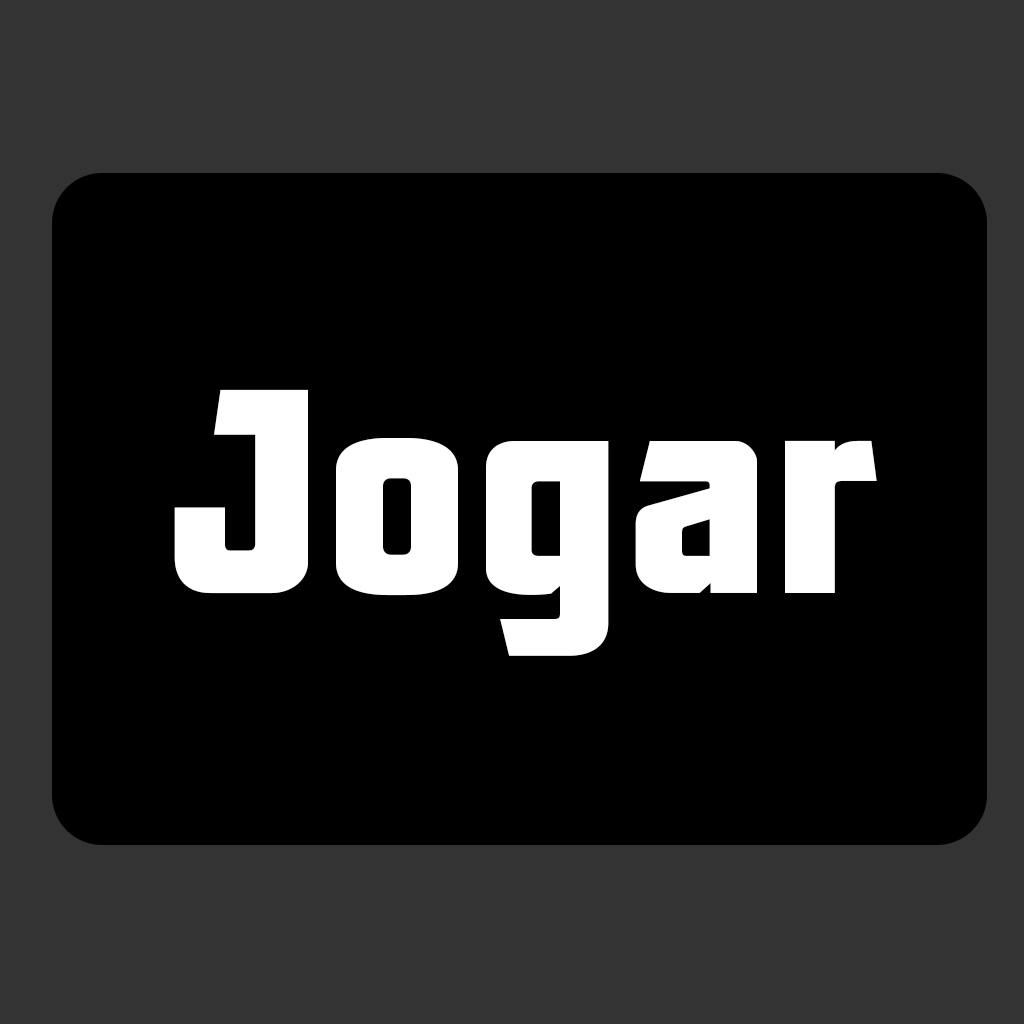
<style>
.page{position:relative;width:1024px;height:1024px;background:#000000}
.page>*{position:absolute;margin:0}
.t1{font:279.1px "AmericanCaptainPatrius";color:#ffffff}
</style>
<div class="page">
<p class="t1" style="left:174px;top:389px;width:703px;height:267px">Jogar</p>
</div>
